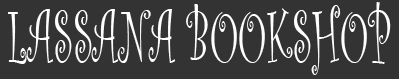
<style>
.page{position:relative;width:399px;height:79px;background:#333333}
.page>*{position:absolute;margin:0}
.t1{font:77.8px "CurlzMT";color:#ffffff;text-transform:uppercase;scale:0.53 1}
</style>
<div class="page">
<p class="t1" style="left:8px;top:2px;width:383px;height:73px">LASSAnA BookSHop</p>
</div>
